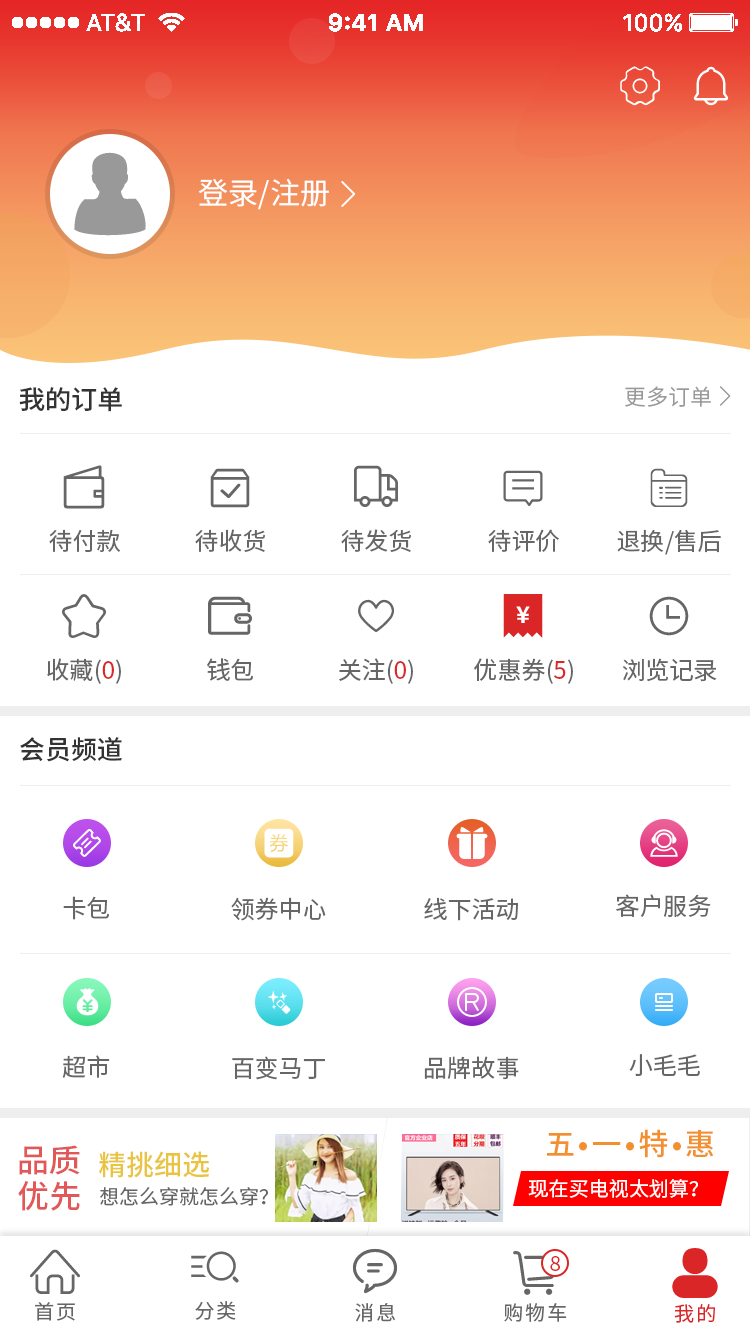
<style>
.page{position:relative;width:750px;height:1334px;background:#ffffff}
.page>*{position:absolute;margin:0}
.t1{font:30px "SourceHanSansCN-Regular";color:#ffffff}
.t2{font:26px "SourceHanSansCN-Medium";color:#333333}
.t3{font:22px "SourceHanSansCN-Normal";color:#999999}
.t4{font:24px "SourceHanSansCN-Regular";color:#666666}
.t5{font:24px "SourceHanSansCN-Regular";color:#da2626}
.t6{font:30px "SourceHanSansCN-Medium";letter-spacing:0.1em;color:#f38f2d}
.t7{font:32px/36px "SourceHanSansCN-Medium";color:#e25757}
.t8{font:28px "SourceHanSansCN-Medium";color:#e9c440}
.t9{font:20px "SourceHanSansCN-Regular";color:#ffffff}
.t10{font:20px "SourceHanSansCN-Regular";color:#666666}
.t11{font:20px "SourceHanSansCN-Normal";color:#da2626}
.t12{font:20px "SourceHanSansCN-Regular";letter-spacing:0.1em;color:#666666}
.t13{font:20px "SourceHanSansCN-Regular";letter-spacing:0.1em;color:#da2626}
</style>
<div class="page">
<p class="t1" style="left:198px;top:178px;width:131px;height:32px">登录/注册</p>
<p class="t2" style="left:19px;top:387px;width:103px;height:25px">我的订单</p>
<p class="t3" style="left:625px;top:386px;width:86px;height:21px">更多订单</p>
<p class="t4" style="left:49px;top:529px;width:72px;height:23px">待付款</p>
<p class="t4" style="left:195px;top:529px;width:70px;height:23px">待收货</p>
<p class="t4" style="left:341px;top:529px;width:70px;height:23px">待发货</p>
<p class="t4" style="left:488px;top:529px;width:71px;height:23px">待评价</p>
<p class="t4" style="left:617px;top:529px;width:104px;height:26px">退换/售后</p>
<p class="t4" style="left:47px;top:658px;width:74px;height:26px">收藏(<span class="t5">0</span>)</p>
<p class="t4" style="left:207px;top:658px;width:46px;height:23px">钱包</p>
<p class="t4" style="left:339px;top:658px;width:74px;height:26px">关注(<span class="t5">0</span>)</p>
<p class="t4" style="left:474px;top:658px;width:99px;height:26px">优惠券(<span class="t5">5</span>)</p>
<p class="t4" style="left:622px;top:658px;width:95px;height:24px">浏览记录</p>
<p class="t2" style="left:20px;top:737px;width:102px;height:25px">会员频道</p>
<p class="t4" style="left:616px;top:894px;width:95px;height:23px">客户服务</p>
<p class="t4" style="left:63px;top:896px;width:46px;height:24px">卡包</p>
<p class="t4" style="left:231px;top:897px;width:95px;height:24px">领券中心</p>
<p class="t4" style="left:424px;top:897px;width:94px;height:24px">线下活动</p>
<p class="t4" style="left:62px;top:1055px;width:48px;height:23px">超市</p>
<p class="t4" style="left:232px;top:1056px;width:93px;height:24px">百变马丁</p>
<p class="t4" style="left:424px;top:1056px;width:95px;height:24px">品牌故事</p>
<p class="t4" style="left:629px;top:1054px;width:71px;height:22px">小毛毛</p>
<p class="t6" style="left:547px;top:1129px;width:167px;height:29px">五•一•特•惠</p>
<p class="t7" style="left:18px;top:1145px;width:62px;height:66px">品质<br>优先</p>
<p class="t8" style="left:99px;top:1151px;width:110px;height:27px">精挑细选</p>
<p class="t9" style="left:528px;top:1179px;width:170px;height:19px">现在买电视太划算？</p>
<p class="t10" style="left:100px;top:1187px;width:168px;height:19px">想怎么穿就怎么穿？</p>
<p class="t11" style="left:550px;top:1256px;width:10px;height:15px">8</p>
<p class="t12" style="left:35px;top:1302px;width:40px;height:19px">首页</p>
<p class="t12" style="left:195px;top:1301px;width:41px;height:19px">分类</p>
<p class="t12" style="left:355px;top:1303px;width:40px;height:19px">消息</p>
<p class="t12" style="left:504px;top:1303px;width:63px;height:19px">购物车</p>
<p class="t13" style="left:674px;top:1304px;width:41px;height:19px">我的</p>
</div>
